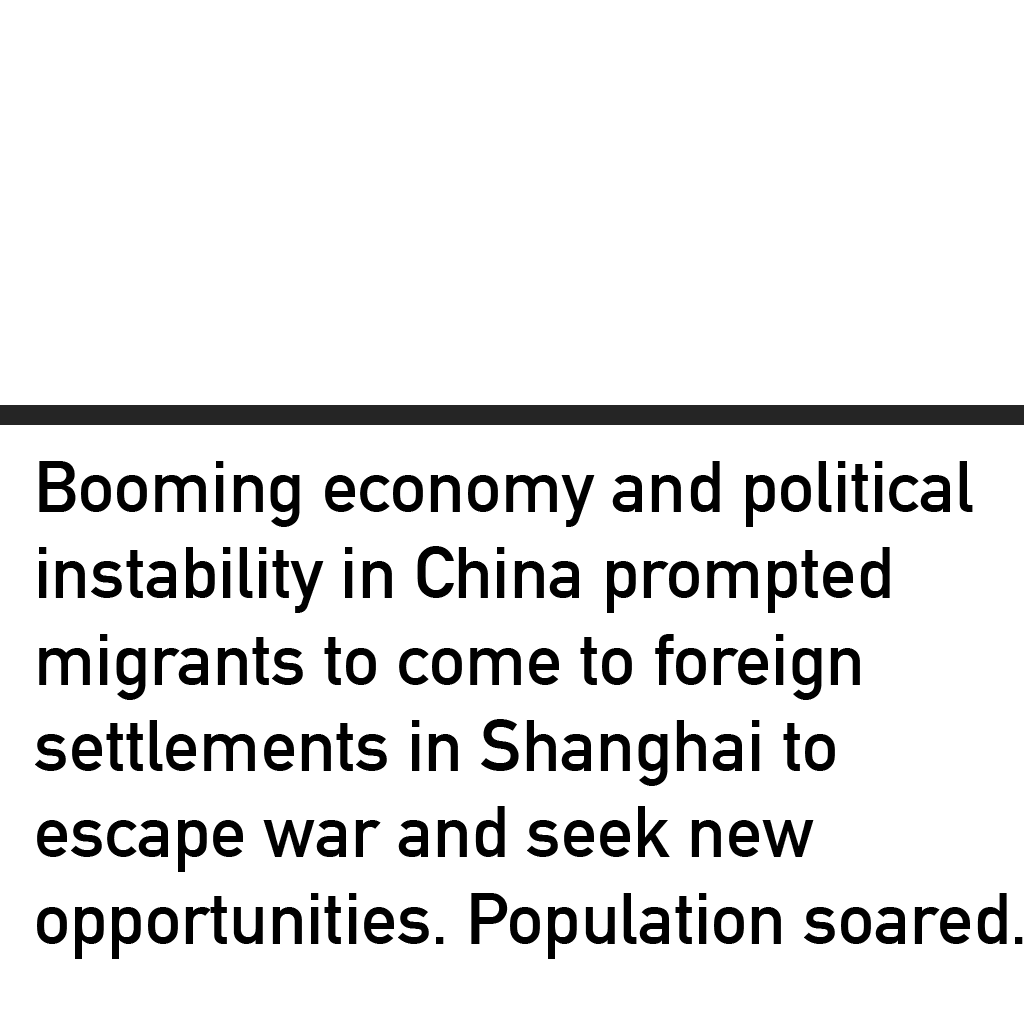
<style>
.page{position:relative;width:1024px;height:1024px;background:#ffffff}
.page>*{position:absolute;margin:0}
.t1{font:72px "DINAlternate-Bold";color:#000000}
</style>
<div class="page">
<p class="t1" style="left:35px;top:461px;width:988px;height:498px">Booming economy and political<br>instability in China prompted <br>migrants to come to foreign <br>settlements in Shanghai to <br>escape war and seek new <br>opportunities. Population soared.</p>
</div>
